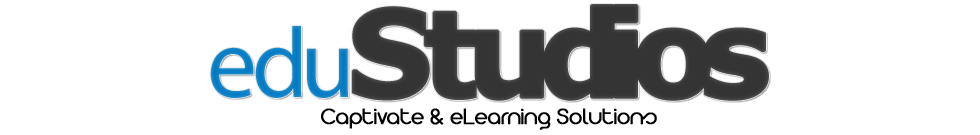
<style>
.page{position:relative;width:980px;height:135px;background:#ffffff}
.page>*{position:absolute;margin:0}
.t1{font:100px "MyriadHebrew-Regular";letter-spacing:-0.08em;color:#007ac3}
.t2{font:100px "MyriadHebrew-Regular";letter-spacing:-0.06em;color:#007ac3}
.t3{font:120px "Verdana-Bold";letter-spacing:-0.1em;color:#343434;font-weight:bold}
.t4{font:120px "Verdana-Bold";letter-spacing:-0.12em;color:#343434;font-weight:bold}
.t5{font:120px "Verdana-Bold";letter-spacing:-0.14em;color:#343434;font-weight:bold}
.t6{font:120px "Verdana-Bold";letter-spacing:-0.175em;color:#343434;font-weight:bold}
.t7{font:120px "Verdana-Bold";letter-spacing:-0.15em;color:#343434;font-weight:bold}
.t8{font:24px "Arista2.0AlternateLight";color:#000000;font-weight:bold}
</style>
<div class="page">
<p class="t1" style="left:210px;top:4px;width:559px;height:97px"><span class="t2">e</span>du<span class="t3">S</span><span class="t4">t</span><span class="t5">u</span><span class="t6">d</span><span class="t5">i</span><span class="t7">o</span><span class="t3">s</span></p>
<p class="t8" style="left:321px;top:108px;width:336px;height:22px">Captivate &amp; eLearning Solutions</p>
</div>
